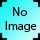
<style>
.page{position:relative;width:40px;height:40px}
.page>*{position:absolute;margin:0}
.t1{font:12px "MyriadPro-Regular";color:#000000}
</style>
<div class="page">
<p class="t1" style="left:5px;top:7px;width:32px;height:25px">No<br>Image</p>
</div>
